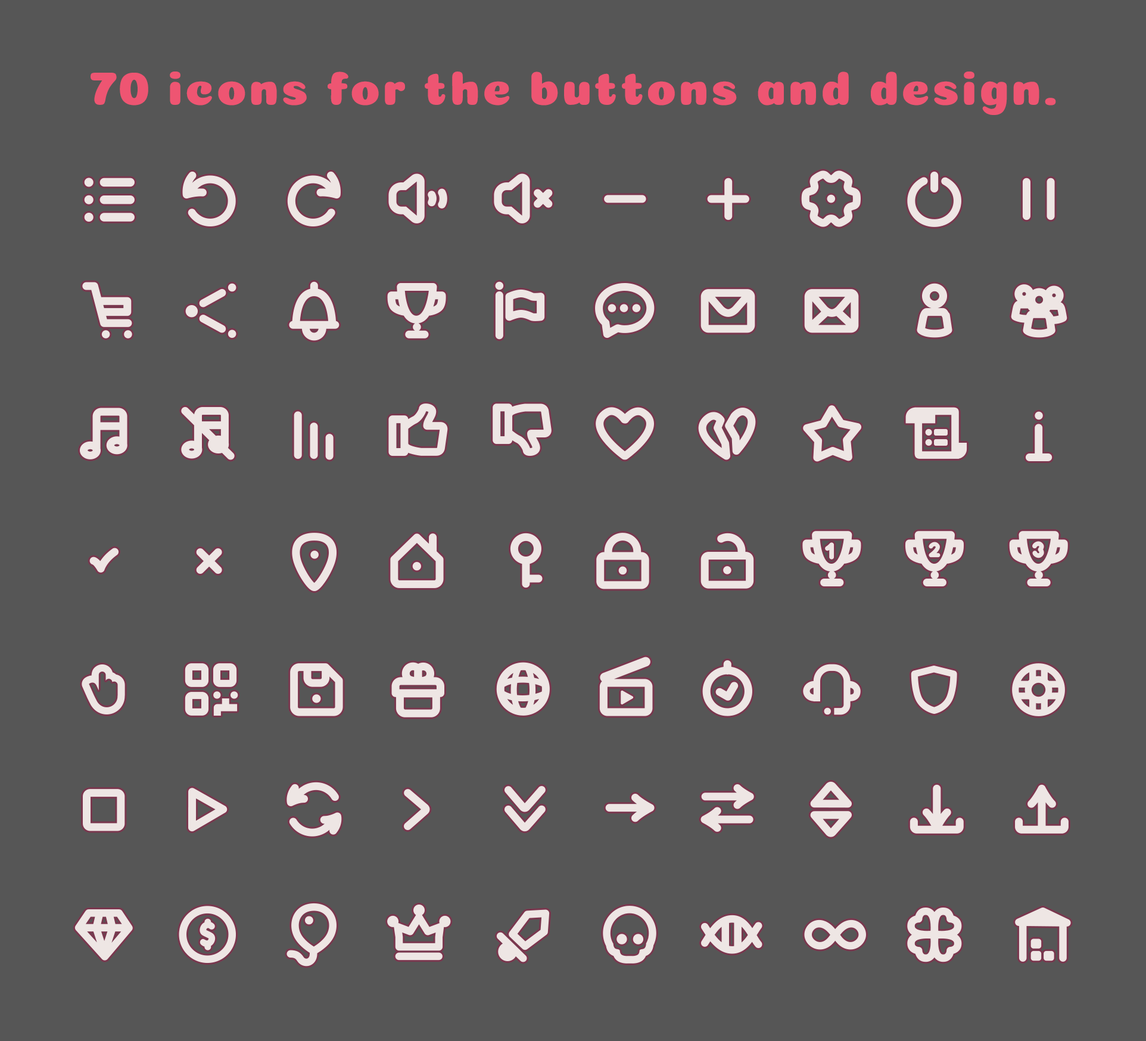
<style>
.page{position:relative;width:1146px;height:1041px;background:#565656}
.page>*{position:absolute;margin:0}
.t1{font:48.2px "Coiny-Regular";letter-spacing:0.05em;color:#ee5572}
</style>
<div class="page">
<p class="t1" style="left:91px;top:71px;width:965px;height:44px">70 icons for the buttons and design.</p>
</div>
